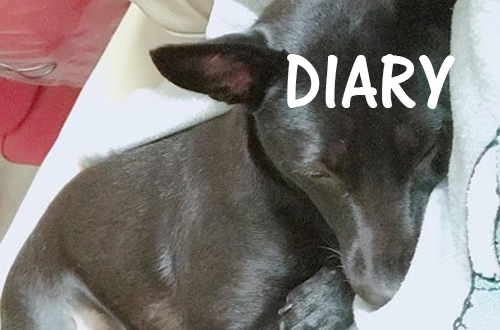
<style>
.page{position:relative;width:500px;height:330px}
.page>*{position:absolute;margin:0}
.t1{font:80px "ARCENA";color:#ffffff}
</style>
<div class="page">
<p class="t1" style="left:287px;top:54px;width:168px;height:55px">DIARY</p>
</div>
